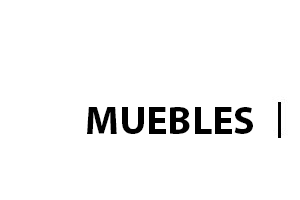
<style>
.page{position:relative;width:300px;height:200px;background:#ffffff}
.page>*{position:absolute;margin:0}
.t1{font:40px "MyriadPro-Bold";color:#000000}
</style>
<div class="page">
<p class="t1" style="left:87px;top:107px;width:166px;height:27px">MUEBLES</p>
</div>
